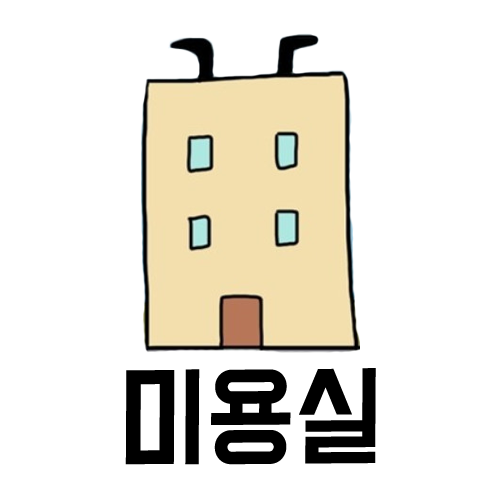
<style>
.page{position:relative;width:500px;height:500px;background:#ffffff}
.page>*{position:absolute;margin:0}
.t1{font:100.1px "BMDoHyeon";color:#000000;scale:0.92 1}
</style>
<div class="page">
<p class="t1" style="left:125px;top:368px;width:251px;height:97px">미용실</p>
</div>
